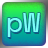
<style>
.page{position:relative;width:48px;height:48px}
.page>*{position:absolute;margin:0}
.t1{font:28px "SpaceMono-Regular";letter-spacing:-0.015em;color:#7afff7}
</style>
<div class="page">
<p class="t1" style="left:7px;top:13px;width:33px;height:24px">pW</p>
</div>
